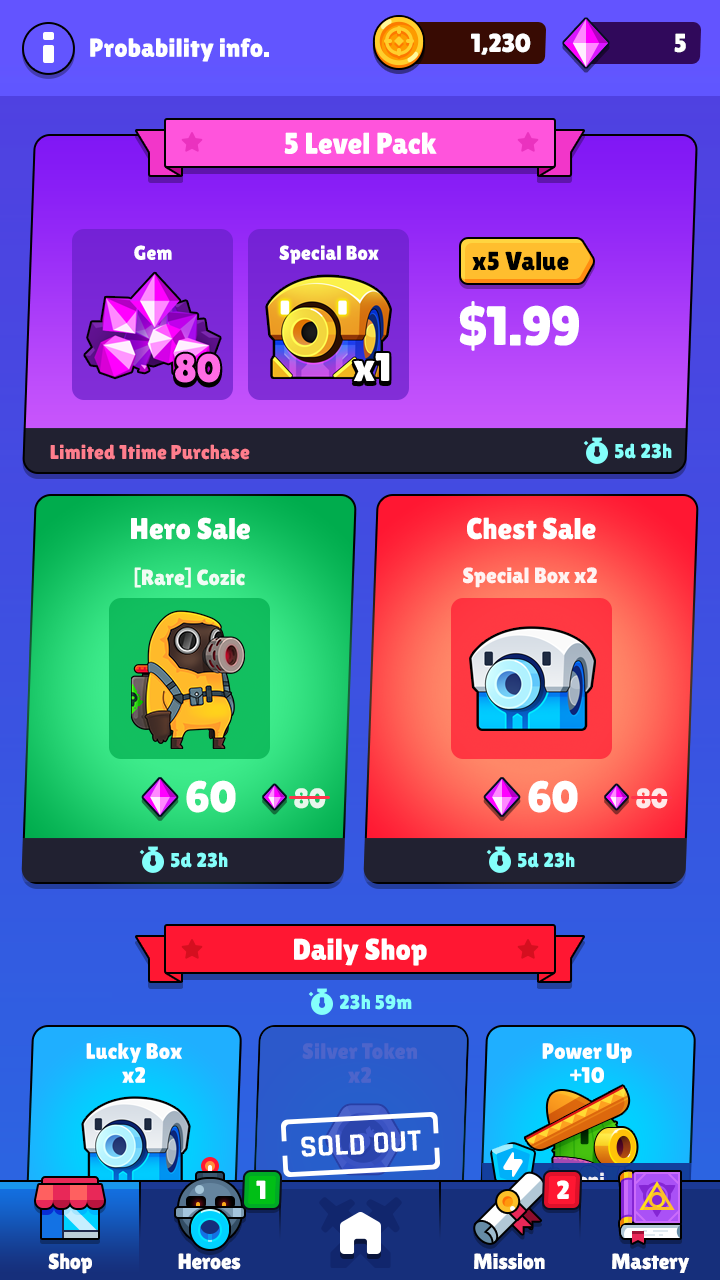
<style>
.page{position:relative;width:720px;height:1280px}
.page>*{position:absolute;margin:0}
.t1{font:26px "LilitaOne";color:#ffffff}
.t2{font:30px "LilitaOne";color:#ffffff}
.t3{font:20px "LilitaOne";color:#ffffff}
.t4{font:26px "LilitaOne";color:#000000}
.t5{font:55.3px "LilitaOne";color:#ffffff;text-transform:uppercase}
.t6{font:40px "LilitaOne";color:#ff6ce4}
.t7{font:40px "LilitaOne";color:#ffffff}
.t8{font:20px "LilitaOne";color:#ff7e8d}
.t9{font:20px "LilitaOne";color:#84fffb}
.t10{font:22px "LilitaOne";color:#ffffff}
.t11{font:44px "LilitaOne";color:#ffffff}
.t12{font:28px "LilitaOne";color:#ffffff;text-transform:uppercase}
.t13{font:22px/24px "LilitaOne";color:#ffffff}
.t14{font:22px/24px "LilitaOne";color:#4d65cb}
.t15{font:31.2px "Rajdhani-Bold";color:#ffffff;text-transform:uppercase}
</style>
<div class="page">
<p class="t1" style="left:90px;top:38px;width:179px;height:24px">Probability info.</p>
<p class="t2" style="left:284px;top:132px;width:153px;height:22px">5 Level Pack</p>
<p class="t3" style="left:134px;top:245px;width:38px;height:15px">Gem</p>
<p class="t3" style="left:279px;top:245px;width:100px;height:19px">Special Box</p>
<p class="t4" style="left:472px;top:251px;width:97px;height:20px">x5 Value</p>
<p class="t5" style="left:459px;top:301px;width:120px;height:50px">$1.99</p>
<p class="t6" style="left:175px;top:353px;width:46px;height:30px">80</p>
<p class="t7" style="left:353px;top:353px;width:37px;height:29px">x1</p>
<p class="t8" style="left:50px;top:444px;width:200px;height:16px">Limited 1time Purchase</p>
<p class="t9" style="left:615px;top:443px;width:57px;height:16px">5d 23h</p>
<p class="t2" style="left:131px;top:517px;width:119px;height:23px">Hero Sale</p>
<p class="t2" style="left:467px;top:517px;width:129px;height:23px">Chest Sale</p>
<p class="t10" style="left:134px;top:567px;width:111px;height:21px;opacity:0.9">[Rare] Cozic</p>
<p class="t10" style="left:463px;top:567px;width:134px;height:21px;opacity:0.9">Special Box x2</p>
<p class="t11" style="left:186px;top:780px;width:50px;height:33px">60</p>
<p class="t11" style="left:528px;top:780px;width:50px;height:33px">60</p>
<p class="t12" style="left:294px;top:788px;width:32px;height:21px;opacity:0.85">80</p>
<p class="t12" style="left:636px;top:788px;width:32px;height:21px;opacity:0.85">80</p>
<p class="t9" style="left:171px;top:852px;width:57px;height:16px">5d 23h</p>
<p class="t9" style="left:518px;top:852px;width:57px;height:16px">5d 23h</p>
<p class="t2" style="left:294px;top:938px;width:133px;height:28px">Daily Shop</p>
<p class="t9" style="left:339px;top:994px;width:73px;height:16px">23h 59m</p>
<p class="t13" style="left:86px;top:1043px;width:96px;height:40px;text-align:center">Lucky Box<br>x2</p>
<p class="t14" style="left:302px;top:1043px;width:115px;height:40px;text-align:center">Silver Token<br>x2</p>
<p class="t13" style="left:542px;top:1043px;width:90px;height:40px;text-align:center">Power Up<br>+10</p>
<p class="t15" style="left:301px;top:1130px;width:120px;height:27px;rotate:-3deg">sold out</p>
</div>
